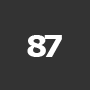
<style>
.page{position:relative;width:90px;height:90px;background:#333333}
.page>*{position:absolute;margin:0}
.t1{font:30px "Verdana-Bold";letter-spacing:-0.15em;color:#ffffff}
</style>
<div class="page">
<p class="t1" style="left:27px;top:35px;width:35px;height:22px">87</p>
</div>
